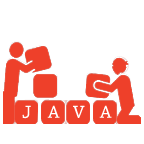
<style>
.page{position:relative;width:144px;height:144px;background:#ffffff}
.page>*{position:absolute;margin:0}
.t1{font:18px "ChaparralPro-Regular";color:#ffffff}
</style>
<div class="page">
<p class="t1" style="left:22px;top:105px;width:9px;height:14px">J</p>
<p class="t1" style="left:47px;top:105px;width:13px;height:13px">A</p>
<p class="t1" style="left:73px;top:105px;width:12px;height:13px">V</p>
<p class="t1" style="left:99px;top:105px;width:13px;height:13px">A</p>
</div>
